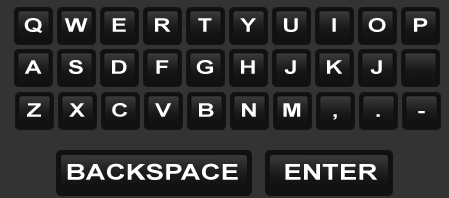
<style>
.page{position:relative;width:449px;height:198px;background:#333333}
.page>*{position:absolute;margin:0}
.t1{font:18.8px "Arial-BoldMT";color:#ffffff;scale:1.27 1}
.t2{font:21.8px "Arial-BoldMT";color:#ffffff;scale:1.27 1}
</style>
<div class="page">
<p class="t1" style="left:24px;top:18px;width:19px;height:15px">Q</p>
<p class="t1" style="left:64px;top:18px;width:24px;height:14px">W</p>
<p class="t1" style="left:112px;top:18px;width:14px;height:14px">E</p>
<p class="t1" style="left:155px;top:18px;width:16px;height:14px">R</p>
<p class="t1" style="left:198px;top:18px;width:14px;height:14px">T</p>
<p class="t1" style="left:240px;top:18px;width:16px;height:14px">Y</p>
<p class="t1" style="left:284px;top:18px;width:14px;height:14px">U</p>
<p class="t1" style="left:332px;top:18px;width:4px;height:14px">I</p>
<p class="t1" style="left:368px;top:18px;width:18px;height:14px">O</p>
<p class="t1" style="left:414px;top:18px;width:14px;height:14px">P</p>
<p class="t1" style="left:24px;top:60px;width:18px;height:14px">A</p>
<p class="t1" style="left:68px;top:60px;width:15px;height:14px">S</p>
<p class="t1" style="left:112px;top:60px;width:15px;height:14px">D</p>
<p class="t1" style="left:156px;top:60px;width:13px;height:14px">F</p>
<p class="t1" style="left:196px;top:60px;width:17px;height:14px">G</p>
<p class="t1" style="left:241px;top:60px;width:14px;height:14px">H</p>
<p class="t1" style="left:284px;top:60px;width:12px;height:14px">J</p>
<p class="t1" style="left:327px;top:60px;width:16px;height:14px">K</p>
<p class="t1" style="left:370px;top:60px;width:12px;height:14px">J</p>
<p class="t1" style="left:27px;top:103px;width:14px;height:14px">Z</p>
<p class="t1" style="left:69px;top:103px;width:16px;height:14px">X</p>
<p class="t1" style="left:112px;top:103px;width:16px;height:14px">C</p>
<p class="t1" style="left:155px;top:103px;width:17px;height:14px">V</p>
<p class="t1" style="left:199px;top:103px;width:15px;height:14px">B</p>
<p class="t1" style="left:242px;top:103px;width:14px;height:14px">N</p>
<p class="t1" style="left:283px;top:103px;width:18px;height:14px">M</p>
<p class="t1" style="left:418px;top:111px;width:7px;height:3px">-</p>
<p class="t1" style="left:333px;top:114px;width:4px;height:6px">,</p>
<p class="t1" style="left:376px;top:114px;width:4px;height:3px">.</p>
<p class="t2" style="left:67px;top:163px;width:171px;height:17px">BACKSPACE</p>
<p class="t2" style="left:285px;top:164px;width:93px;height:16px">ENTER</p>
</div>
